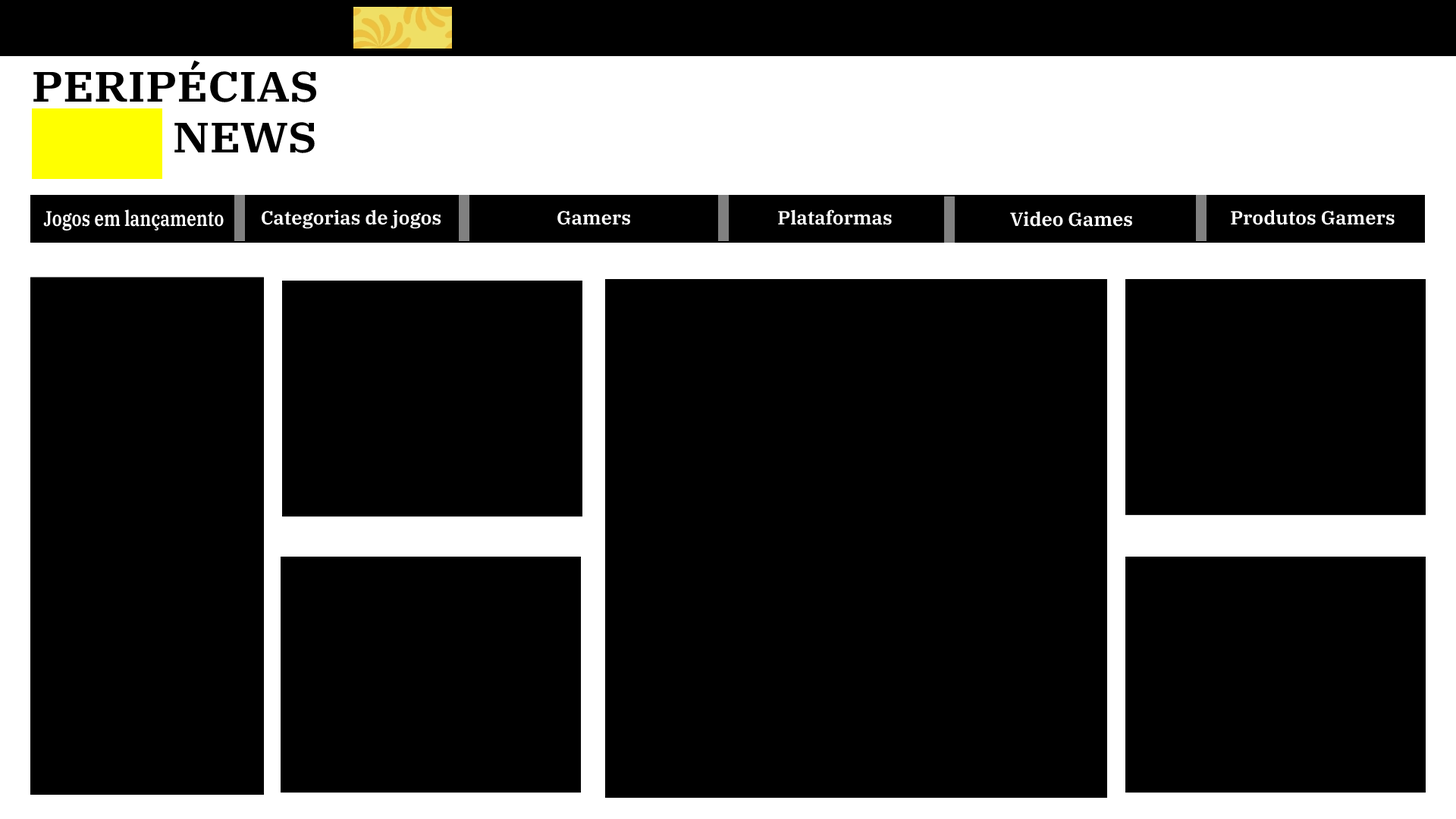
<style>
.page{position:relative;width:1456px;height:819px;background:#000000}
.page>*{position:absolute;margin:0}
.t1{font:42.5px "IBMPlexSerif-SemiBold";color:#000000;scale:1.09 1}
.t2{font:21.2px "IBMPlexSerif-SemiBold";color:#ffffff;scale:0.8 1}
.t3{font:18.9px "IBMPlexSerif-SemiBold";color:#ffffff}
</style>
<div class="page">
<p class="t1" style="left:33px;top:60px;width:283px;height:93px;text-align:center">PERIPÉCIAS<br>             NEWS</p>
<p class="t2" style="left:43px;top:209px;width:181px;height:22px">Jogos em lançamento</p>
<p class="t3" style="left:262px;top:209px;width:179px;height:20px">Categorias de jogos</p>
<p class="t3" style="left:778px;top:209px;width:114px;height:16px">Plataformas</p>
<p class="t3" style="left:1231px;top:209px;width:164px;height:16px">Produtos Gamers</p>
<p class="t3" style="left:557px;top:211px;width:73px;height:14px">Gamers</p>
<p class="t3" style="left:1010px;top:211px;width:122px;height:16px">Video Games</p>
</div>
